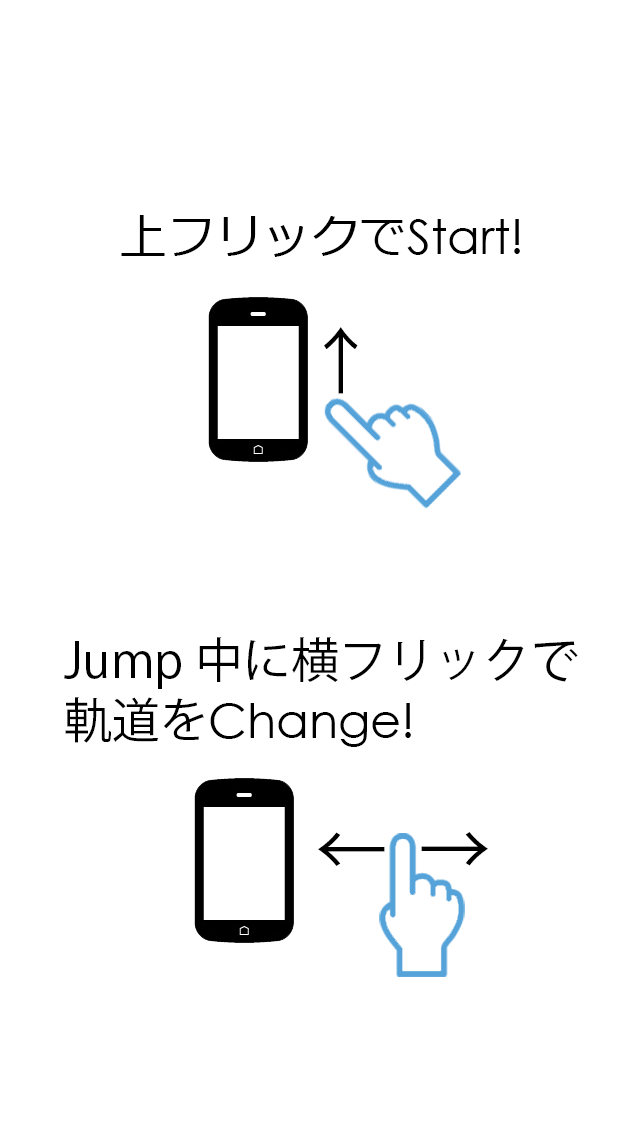
<style>
.page{position:relative;width:640px;height:1136px;background:#ffffff}
.page>*{position:absolute;margin:0}
.t1{font:48px "Meiryo";color:#000000}
.t2{font:48px "CenturyGothic";color:#000000}
.t3{font:72px "KozGoPr6N-Regular";color:#000000}
.t4{font:48px/60px "KozGoPr6N-Regular";color:#000000}
.t5{font:48px/60px "CenturyGothic";color:#000000}
</style>
<div class="page">
<p class="t1" style="left:121px;top:215px;width:399px;height:42px">上フリックで<span class="t2">Start!</span></p>
<p class="t3" style="left:324px;top:327px;width:34px;height:67px">↑</p>
<p class="t4" style="left:64px;top:637px;width:514px;height:110px">Jump 中に横フリックで<br>軌道を<span class="t5">Change!</span></p>
<p class="t3" style="left:318px;top:832px;width:67px;height:34px;rotate:-90deg">↑</p>
<p class="t3" style="left:421px;top:832px;width:67px;height:34px;rotate:90deg">↑</p>
</div>
